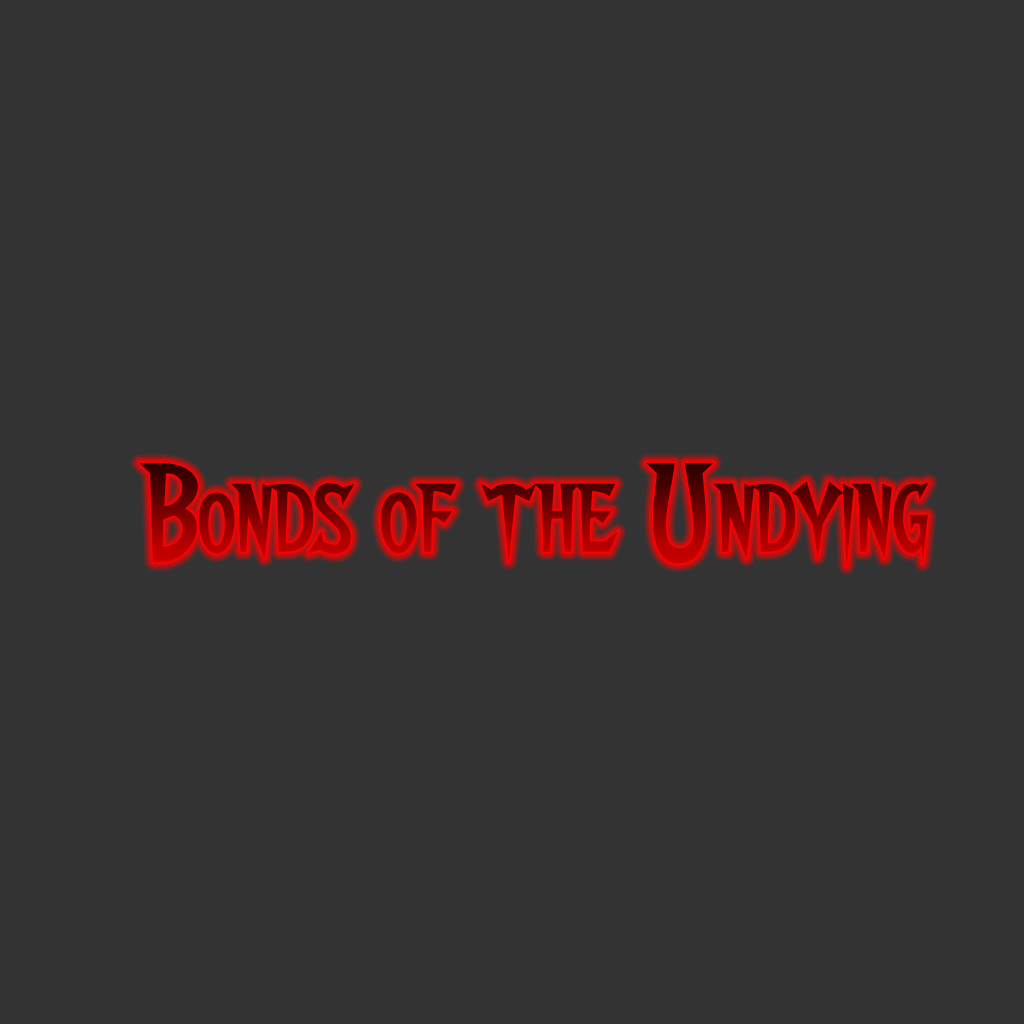
<style>
.page{position:relative;width:1024px;height:1024px;background:#333333}
.page>*{position:absolute;margin:0}
.t1{font:130px "Walshes-Regular"}
</style>
<div class="page">
<p class="t1" style="left:139px;top:462px;width:790px;height:105px">Bonds of the Undying</p>
</div>
